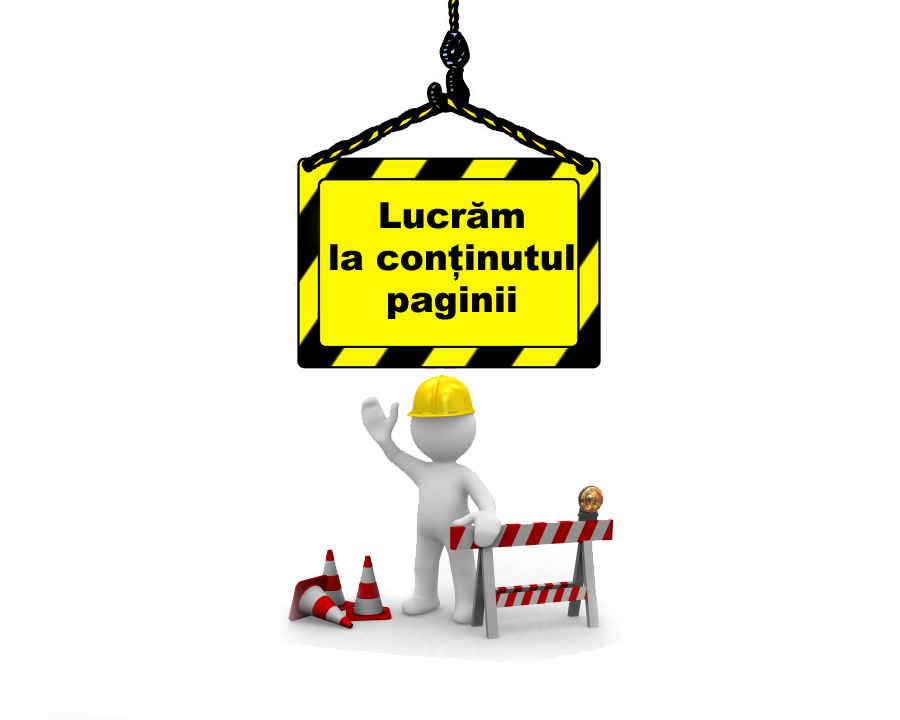
<style>
.page{position:relative;width:900px;height:720px;background:#ffffff}
.page>*{position:absolute;margin:0}
.t1{font:36px/14px "Arial-Black";color:#010100}
</style>
<div class="page">
<p class="t1" style="left:330px;top:201px;width:244px;height:119px;text-align:center">Lucrăm<br><br><br>la conținutul<br><br><br>paginii</p>
</div>
